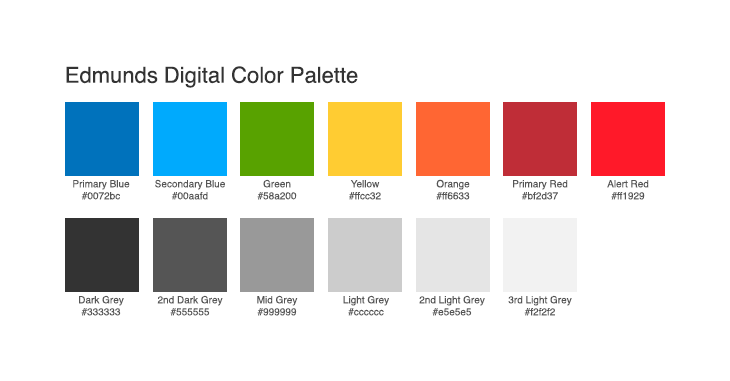
<style>
.page{position:relative;width:730px;height:381px;background:#ffffff}
.page>*{position:absolute;margin:0}
.t1{font:22px "Helvetica";color:#333333}
.t2{font:22px "Helvetica";color:#333333;text-transform:uppercase}
.t3{font:10px/12px "Helvetica";color:#555555}
</style>
<div class="page">
<p class="t1" style="left:66px;top:66px;width:292px;height:22px"><span class="t2">E</span>dmunds Digital Color Palette</p>
<p class="t3" style="left:73px;top:180px;width:57px;height:20px;text-align:center">Primary Blue<br>#0072bc</p>
<p class="t3" style="left:155px;top:179px;width:70px;height:21px;text-align:center">Secondary Blue<br>#00aafd</p>
<p class="t3" style="left:257px;top:179px;width:40px;height:21px;text-align:center">Green<br>#58a200</p>
<p class="t3" style="left:349px;top:180px;width:32px;height:20px;text-align:center">Yellow<br>#ffcc32</p>
<p class="t3" style="left:436px;top:179px;width:34px;height:21px;text-align:center">Orange <br>#ff6633</p>
<p class="t3" style="left:513px;top:180px;width:55px;height:20px;text-align:center">Primary Red<br>#bf2d37</p>
<p class="t3" style="left:607px;top:180px;width:42px;height:20px;text-align:center">Alert Red <br>#ff1929</p>
<p class="t3" style="left:79px;top:295px;width:45px;height:21px;text-align:center">Dark Grey<br>#333333</p>
<p class="t3" style="left:157px;top:295px;width:66px;height:21px;text-align:center">2nd Dark Grey<br>#555555</p>
<p class="t3" style="left:257px;top:295px;width:41px;height:21px;text-align:center">Mid Grey<br>#999999</p>
<p class="t3" style="left:343px;top:295px;width:46px;height:21px;text-align:center">Light Grey<br>#cccccc</p>
<p class="t3" style="left:419px;top:295px;width:66px;height:21px;text-align:center">2nd Light Grey<br>#e5e5e5</p>
<p class="t3" style="left:508px;top:295px;width:64px;height:21px;text-align:center">3rd Light Grey<br>#f2f2f2</p>
</div>
